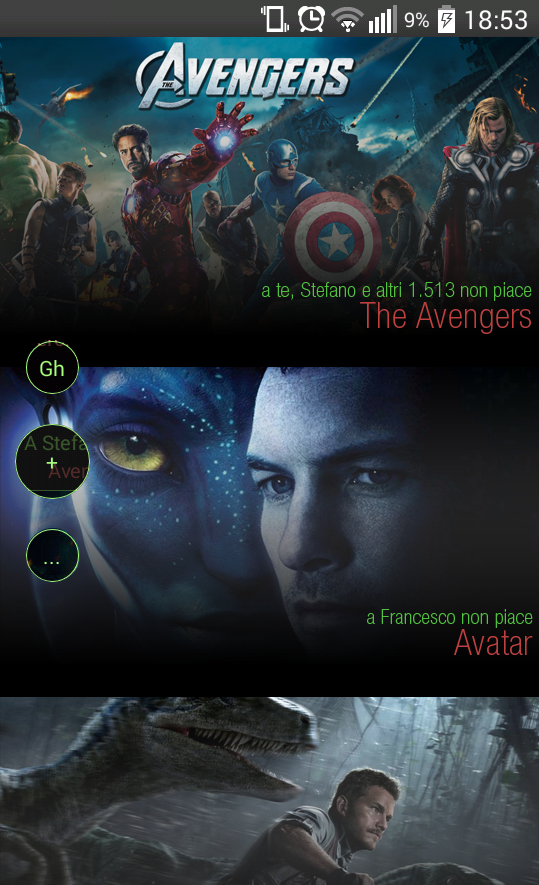
<style>
.page{position:relative;width:539px;height:885px}
.page>*{position:absolute;margin:0}
.t1{font:21px "HelveticaNeue-ThinCond";letter-spacing:0.02em;color:#52c040}
.t2{font:36px "HelveticaNeue-ThinCond";letter-spacing:0.02em;color:#c04040}
</style>
<div class="page">
<p class="t1" style="left:262px;top:282px;width:270px;height:19px">a te, Stefano e altri 1.513 non piace</p>
<p class="t2" style="left:360px;top:302px;width:171px;height:32px">The Avengers</p>
<p class="t1" style="left:367px;top:609px;width:166px;height:19px">a Francesco non piace</p>
<p class="t2" style="left:454px;top:629px;width:79px;height:26px">Avatar</p>
</div>
